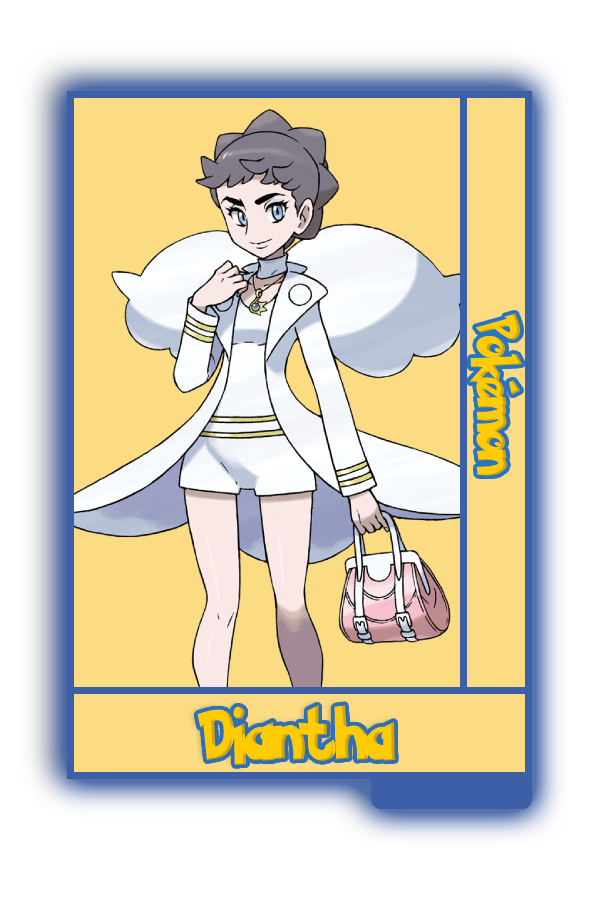
<style>
.page{position:relative;width:600px;height:900px;background:#fbdc83}
.page>*{position:absolute;margin:0}
.t1{font:48.8px "PokemonSolidNormal";color:#ffcb05;scale:0.8 1}
.t2{font:56.6px "PokemonSolidNormal";color:#ffcb05;scale:0.92 1}
</style>
<div class="page">
<p class="t1" style="left:469px;top:313px;width:54px;height:163px;rotate:90deg">Pokémon</p>
<p class="t2" style="left:197px;top:705px;width:198px;height:60px">Diantha</p>
</div>
